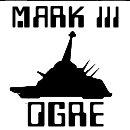
<style>
.page{position:relative;width:130px;height:130px;background:#ffffff}
.page>*{position:absolute;margin:0}
.t1{font:25px "Checkbook";letter-spacing:0.06em;color:#000000;font-weight:bold}
.t2{font:29.2px "Checkbook";letter-spacing:0.06em;color:#000000;font-weight:bold}
</style>
<div class="page">
<p class="t1" style="left:12px;top:5px;width:107px;height:22px">MARK III</p>
<p class="t2" style="left:27px;top:101px;width:77px;height:25px">OGRE</p>
</div>
